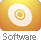
<style>
.page{position:relative;width:41px;height:52px;background:#ffffff}
.page>*{position:absolute;margin:0}
.t1{font:9px "MyriadPro-Regular";letter-spacing:-0.015em;color:#878787}
</style>
<div class="page">
<p class="t1" style="left:3px;top:33px;width:33px;height:7px">Software</p>
</div>
